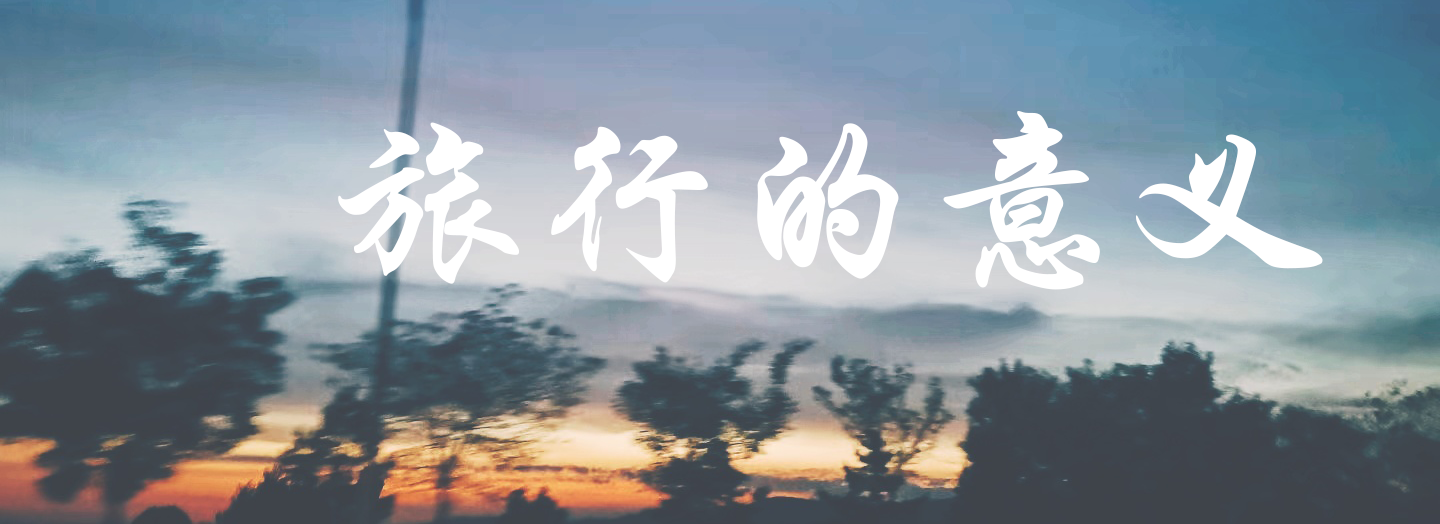
<style>
.page{position:relative;width:1440px;height:524px}
.page>*{position:absolute;margin:0}
.t1{font:200px "STXingkai";color:#ffffff}
</style>
<div class="page">
<p class="t1" style="left:338px;top:110px;width:985px;height:180px">旅行的意义</p>
</div>
